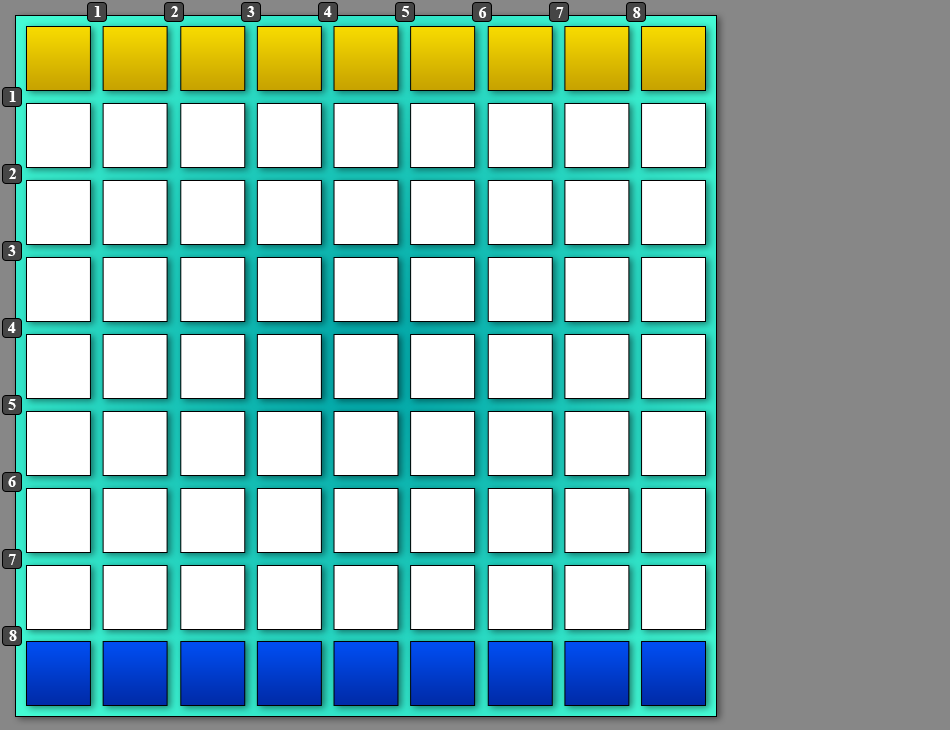
<style>
.page{position:relative;width:950px;height:730px;background:#ffffff}
.page>*{position:absolute;margin:0}
.t1{font:16px "TimesNewRomanPS-BoldMT";color:#ffffff}
</style>
<div class="page">
<p class="t1" style="left:94px;top:6px;width:7px;height:11px">1</p>
<p class="t1" style="left:171px;top:6px;width:7px;height:11px">2</p>
<p class="t1" style="left:247px;top:6px;width:8px;height:11px">3</p>
<p class="t1" style="left:324px;top:6px;width:8px;height:11px">4</p>
<p class="t1" style="left:402px;top:6px;width:7px;height:11px">5</p>
<p class="t1" style="left:479px;top:7px;width:8px;height:11px">6</p>
<p class="t1" style="left:556px;top:7px;width:8px;height:11px">7</p>
<p class="t1" style="left:633px;top:7px;width:8px;height:11px">8</p>
<p class="t1" style="left:9px;top:91px;width:7px;height:11px">1</p>
<p class="t1" style="left:9px;top:168px;width:7px;height:11px">2</p>
<p class="t1" style="left:8px;top:245px;width:8px;height:11px">3</p>
<p class="t1" style="left:8px;top:322px;width:8px;height:11px">4</p>
<p class="t1" style="left:8px;top:399px;width:8px;height:11px">5</p>
<p class="t1" style="left:8px;top:476px;width:8px;height:11px">6</p>
<p class="t1" style="left:8px;top:554px;width:8px;height:11px">7</p>
<p class="t1" style="left:9px;top:630px;width:8px;height:11px">8</p>
</div>
